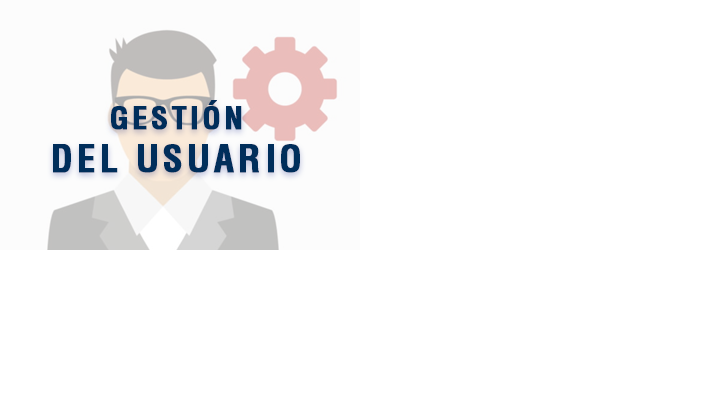
<style>
.page{position:relative;width:720px;height:394px;background:#ffffff}
.page>*{position:absolute;margin:0}
.t1{font:36px "Helvetica-Condensed-Bold";letter-spacing:0.1em;color:#002e5b;font-weight:bold}
.t2{font:30px "Helvetica-Condensed-Bold";letter-spacing:0.1em;color:#002e5b;font-weight:bold}
</style>
<div class="page">
<p class="t1" style="left:53px;top:100px;width:247px;height:73px;text-align:center"><span class="t2">GESTIÓN<br></span>DEL USUARIO</p>
</div>
